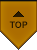
<style>
.page{position:relative;width:37px;height:50px}
.page>*{position:absolute;margin:0}
.t1{font:9px "Arial-BoldMT";color:#2c1c00}
</style>
<div class="page">
<p class="t1" style="left:9px;top:21px;width:19px;height:7px">TOP</p>
</div>
